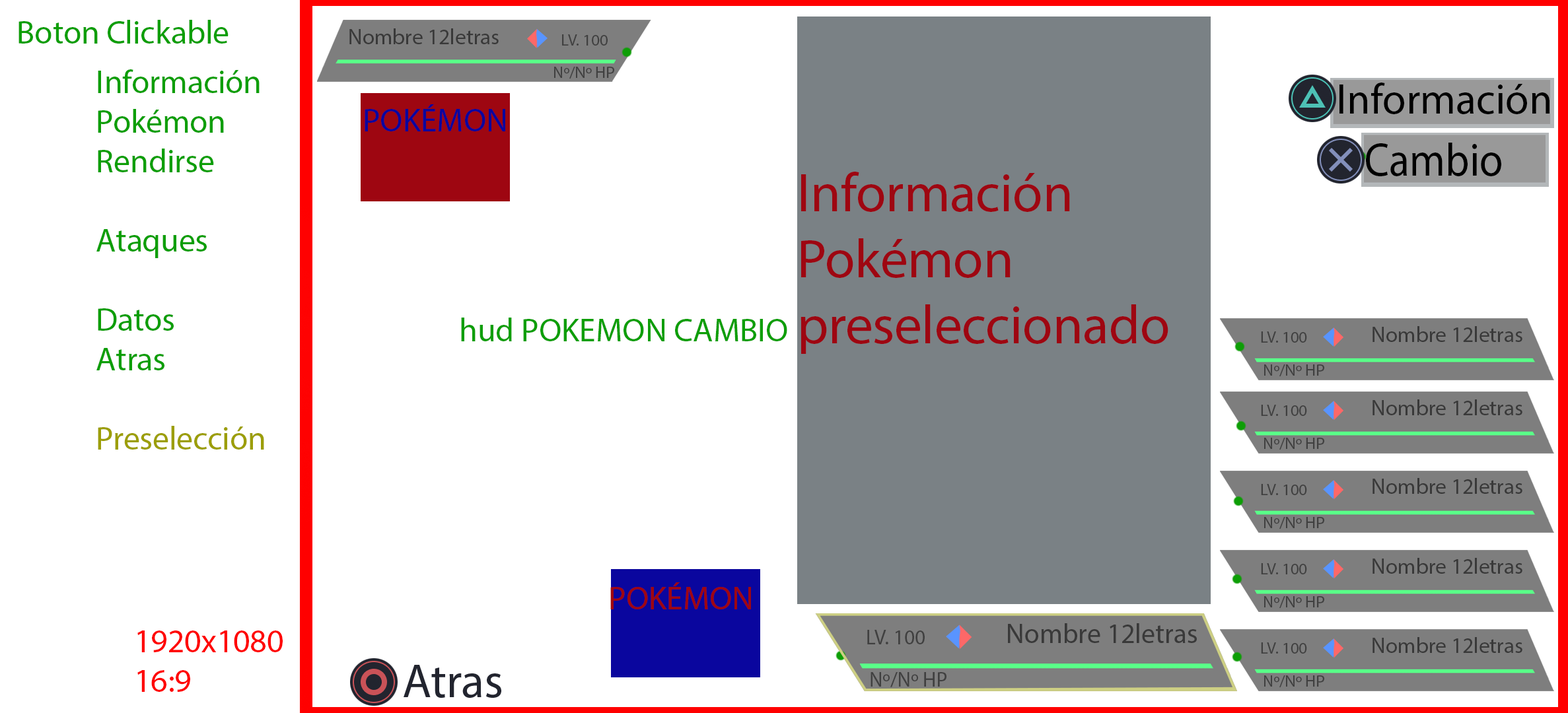
<style>
.page{position:relative;width:1568px;height:713px;background:#ffffff}
.page>*{position:absolute;margin:0}
.t1{font:33px "MyriadPro-Regular";letter-spacing:-0.005em;color:#0d9e06}
.t2{font:21.9px "MyriadPro-Regular";color:#393939}
.t3{font:16.4px "MyriadPro-Regular";color:#404040}
.t4{font:33px "MyriadPro-Regular";letter-spacing:-0.005em;color:#9c9e06}
.t5{font:42.7px "MyriadPro-Regular";color:#000000}
.t6{font:33px "MyriadPro-Regular";color:#0a069e}
.t7{font:46.6px "MyriadPro-Regular";color:#000000;scale:0.92 1}
.t8{font:55px "MyriadPro-Regular";letter-spacing:-0.005em;color:#9e0611}
.t9{font:33px "MyriadPro-Regular";color:#0d9e06}
.t10{font:33px "MyriadPro-Regular";color:#9e0611}
.t11{font:27.6px "MyriadPro-Regular";color:#393939}
.t12{font:33px "MyriadPro-Regular";letter-spacing:-0.005em;color:#ff0000}
.t13{font:20.7px "MyriadPro-Regular";color:#404040}
</style>
<div class="page">
<p class="t1" style="left:18px;top:20px;width:211px;height:24px">Boton Clickable</p>
<p class="t2" style="left:349px;top:28px;width:150px;height:16px">Nombre 12letras</p>
<p class="t3" style="left:562px;top:34px;width:46px;height:12px">LV. 100</p>
<p class="t1" style="left:96px;top:69px;width:168px;height:381px">Información <br>Pokémon<br>Rendirse<br><br>Ataques<br><br>Datos<br>Atras<br><br><span class="t4">Preselección</span></p>
<p class="t3" style="left:554px;top:67px;width:60px;height:12px">Nº/Nº HP</p>
<p class="t5" style="left:1339px;top:83px;width:211px;height:31px">Información</p>
<p class="t6" style="left:365px;top:104px;width:140px;height:27px">POKÉMON</p>
<p class="t7" style="left:1366px;top:143px;width:135px;height:33px">Cambio</p>
<p class="t8" style="left:801px;top:172px;width:367px;height:182px">Información Pokémon preseleccionado</p>
<p class="t9" style="left:461px;top:318px;width:326px;height:23px">hud POKEMON CAMBIO</p>
<p class="t2" style="left:1372px;top:326px;width:150px;height:16px">Nombre 12letras</p>
<p class="t3" style="left:1261px;top:332px;width:46px;height:11px">LV. 100</p>
<p class="t3" style="left:1264px;top:365px;width:60px;height:11px">Nº/Nº HP</p>
<p class="t2" style="left:1372px;top:400px;width:150px;height:15px">Nombre 12letras</p>
<p class="t3" style="left:1261px;top:405px;width:46px;height:11px">LV. 100</p>
<p class="t3" style="left:1264px;top:438px;width:60px;height:12px">Nº/Nº HP</p>
<p class="t3" style="left:1261px;top:484px;width:46px;height:11px">LV. 100</p>
<p class="t2" style="left:1372px;top:478px;width:150px;height:16px">Nombre 12letras</p>
<p class="t3" style="left:1264px;top:517px;width:60px;height:12px">Nº/Nº HP</p>
<p class="t3" style="left:1261px;top:563px;width:46px;height:12px">LV. 100</p>
<p class="t2" style="left:1372px;top:558px;width:150px;height:16px">Nombre 12letras</p>
<p class="t10" style="left:610px;top:583px;width:141px;height:27px">POKÉMON</p>
<p class="t3" style="left:1264px;top:596px;width:60px;height:12px">Nº/Nº HP</p>
<p class="t11" style="left:1008px;top:624px;width:189px;height:19px">Nombre 12letras</p>
<p class="t12" style="left:137px;top:631px;width:146px;height:61px">1920x1080<br>16:9</p>
<p class="t13" style="left:867px;top:630px;width:58px;height:15px">LV. 100</p>
<p class="t2" style="left:1372px;top:637px;width:150px;height:16px">Nombre 12letras</p>
<p class="t3" style="left:1261px;top:643px;width:46px;height:11px">LV. 100</p>
<p class="t13" style="left:871px;top:672px;width:75px;height:16px">Nº/Nº HP</p>
<p class="t3" style="left:1264px;top:676px;width:60px;height:12px">Nº/Nº HP</p>
</div>
